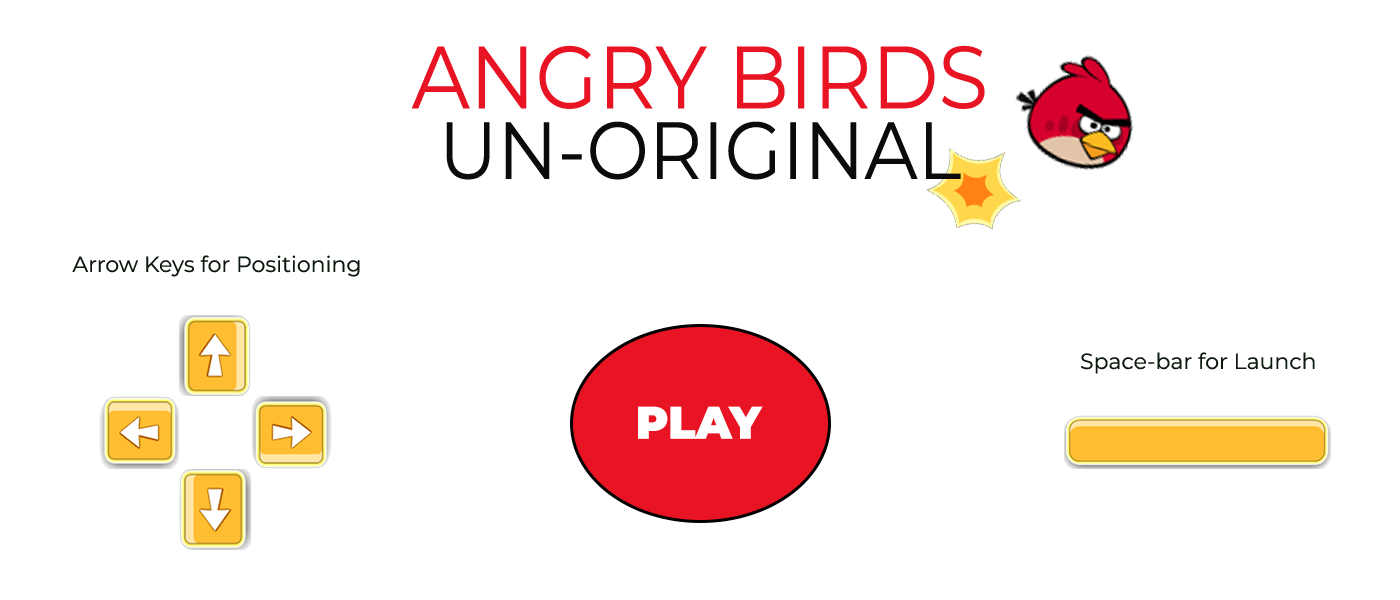
<style>
.page{position:relative;width:1400px;height:600px;background:#ffffff}
.page>*{position:absolute;margin:0}
.t1{font:88.2px/35.3px "Montserrat-Regular";color:#e91423;scale:0.92 1}
.t2{font:80.9px/35.3px "Montserrat-Regular";color:#0d0a0b;scale:0.92 1}
.t3{font:22px "Montserrat-Regular";color:#0e190e}
.t4{font:45.6px "Montserrat-Black";color:#ffffff}
</style>
<div class="page">
<p class="t1" style="left:411px;top:45px;width:574px;height:135px;text-align:center">ANGRY BIRDS<br><br><span class="t2">UN-ORIGINAL</span></p>
<p class="t3" style="left:72px;top:255px;width:288px;height:22px">Arrow Keys for Positioning</p>
<p class="t3" style="left:1081px;top:352px;width:234px;height:22px">Space-bar for Launch</p>
<p class="t4" style="left:638px;top:406px;width:125px;height:33px">PLAY</p>
</div>
